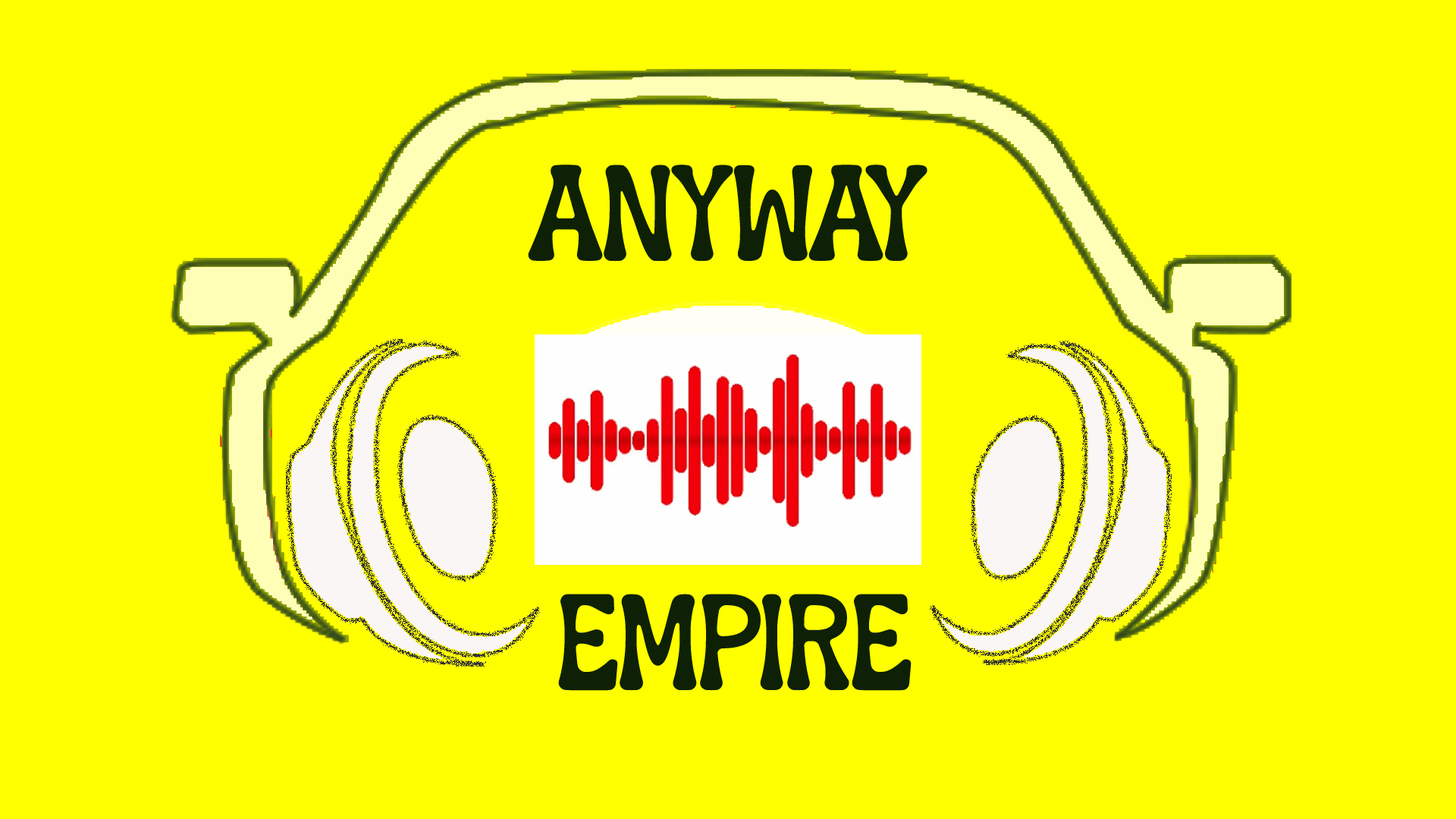
<style>
.page{position:relative;width:1456px;height:819px;background:#ffff00}
.page>*{position:absolute;margin:0}
.t1{font:113.7px "FruitsDelight";letter-spacing:-0.025em;color:#0e2106}
</style>
<div class="page">
<p class="t1" style="left:528px;top:165px;width:399px;height:97px">ANYWAY</p>
<p class="t1" style="left:558px;top:594px;width:354px;height:97px">EMPIRE</p>
</div>
